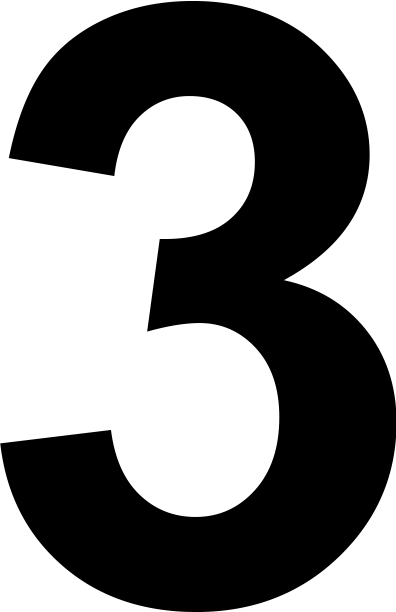
<style>
.page{position:relative;width:396px;height:612px;background:#ffffff}
.page>*{position:absolute;margin:0}
.t1{font:833.3px "Arial-BoldMT";letter-spacing:0.04em;color:#000000}
</style>
<div class="page">
<p class="t1" style="left:0px;top:1px;width:397px;height:611px">3</p>
</div>
